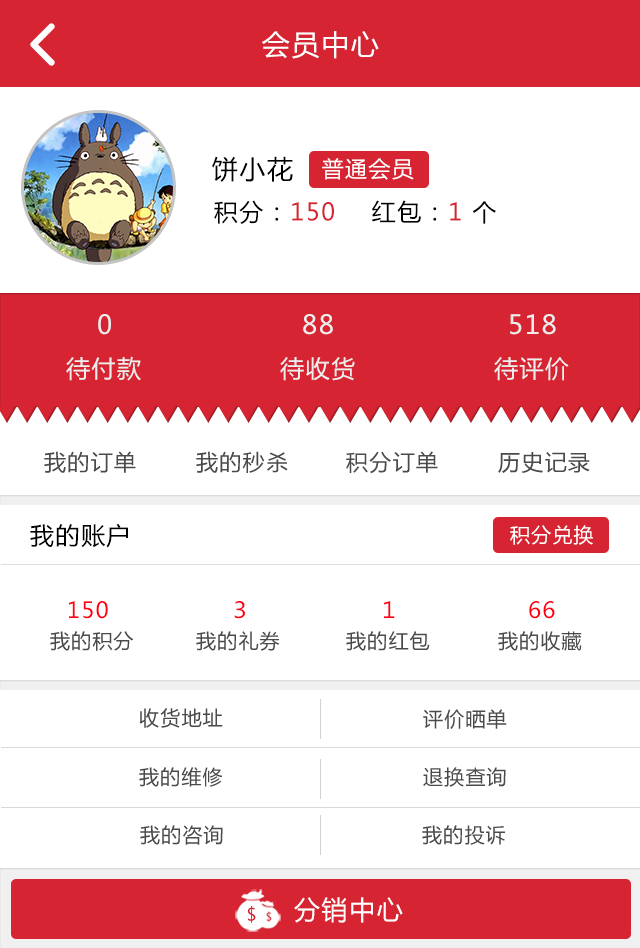
<style>
.page{position:relative;width:640px;height:948px;background:#ffffff}
.page>*{position:absolute;margin:0}
.t1{font:28px "MicrosoftYaHei";letter-spacing:0.06em;color:#ffffff}
.t2{font:26px "MicrosoftYaHei";letter-spacing:0.06em;color:#000000}
.t3{font:22px "MicrosoftYaHei";letter-spacing:0.06em;color:#ffffff}
.t4{font:24px "MicrosoftYaHei";letter-spacing:0.06em;color:#000000}
.t5{font:24px "MicrosoftYaHei";letter-spacing:0.06em;color:#d62432}
.t6{font:24px "MicrosoftYaHei";letter-spacing:0.06em;color:#010101}
.t7{font:26px "MicrosoftYaHei";letter-spacing:0.06em;color:#ededed}
.t8{font:24px "MicrosoftYaHei";letter-spacing:0.06em;color:#ededed}
.t9{font:22px "MicrosoftYaHei";letter-spacing:0.06em;color:#4a4a4a}
.t10{font:20px "MicrosoftYaHei";letter-spacing:0.06em;color:#ffffff}
.t11{font:22px "MicrosoftYaHei";letter-spacing:0.06em;color:#ff0014}
.t12{font:20px "MicrosoftYaHei";letter-spacing:0.06em;color:#4a4a4a}
.t13{font:26px "MicrosoftYaHei";letter-spacing:0.06em;color:#ffffff}
</style>
<div class="page">
<p class="t1" style="left:262px;top:31px;width:117px;height:28px">会员中心</p>
<p class="t2" style="left:212px;top:156px;width:81px;height:26px">饼小花</p>
<p class="t3" style="left:322px;top:158px;width:92px;height:22px">普通会员</p>
<p class="t4" style="left:214px;top:200px;width:120px;height:24px">积分：<span class="t5">150</span></p>
<p class="t4" style="left:372px;top:200px;width:124px;height:24px">红包：<span class="t5">1 </span><span class="t6">个</span></p>
<p class="t7" style="left:98px;top:314px;width:13px;height:21px">0</p>
<p class="t7" style="left:303px;top:314px;width:30px;height:21px">88</p>
<p class="t7" style="left:510px;top:314px;width:46px;height:21px">518</p>
<p class="t8" style="left:66px;top:356px;width:75px;height:25px">待付款</p>
<p class="t8" style="left:280px;top:357px;width:75px;height:24px">待收货</p>
<p class="t8" style="left:494px;top:357px;width:75px;height:24px">待评价</p>
<p class="t9" style="left:44px;top:451px;width:92px;height:22px">我的订单</p>
<p class="t9" style="left:196px;top:451px;width:92px;height:22px">我的秒杀</p>
<p class="t9" style="left:346px;top:451px;width:92px;height:23px">积分订单</p>
<p class="t9" style="left:498px;top:452px;width:92px;height:21px">历史记录</p>
<p class="t4" style="left:30px;top:523px;width:98px;height:25px">我的账户</p>
<p class="t10" style="left:510px;top:525px;width:83px;height:20px">积分兑换</p>
<p class="t11" style="left:69px;top:601px;width:39px;height:18px">150</p>
<p class="t11" style="left:234px;top:601px;width:11px;height:18px">３</p>
<p class="t11" style="left:384px;top:601px;width:11px;height:17px">１</p>
<p class="t11" style="left:529px;top:601px;width:26px;height:18px">66</p>
<p class="t12" style="left:50px;top:631px;width:84px;height:20px">我的积分</p>
<p class="t12" style="left:196px;top:631px;width:84px;height:20px">我的礼券</p>
<p class="t12" style="left:346px;top:631px;width:84px;height:20px">我的红包</p>
<p class="t12" style="left:498px;top:631px;width:84px;height:20px">我的收藏</p>
<p class="t12" style="left:139px;top:708px;width:84px;height:20px">收货地址</p>
<p class="t12" style="left:423px;top:709px;width:84px;height:20px">评价晒单</p>
<p class="t12" style="left:139px;top:767px;width:84px;height:20px">我的维修</p>
<p class="t12" style="left:423px;top:767px;width:83px;height:20px">退换查询</p>
<p class="t12" style="left:140px;top:825px;width:83px;height:20px">我的咨询</p>
<p class="t12" style="left:422px;top:825px;width:83px;height:20px">我的投诉</p>
<p class="t13" style="left:294px;top:897px;width:109px;height:26px">分销中心</p>
</div>
